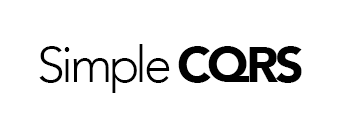
<style>
.page{position:relative;width:356px;height:128px;background:#ffffff}
.page>*{position:absolute;margin:0}
.t1{font:50px "Avenir-Light";letter-spacing:-0.075em;color:#000000}
.t2{font:50px "Avenir-Black";letter-spacing:-0.075em;color:#000000}
</style>
<div class="page">
<p class="t1" style="left:39px;top:44px;width:263px;height:49px">Simple <span class="t2">CQRS</span></p>
</div>
